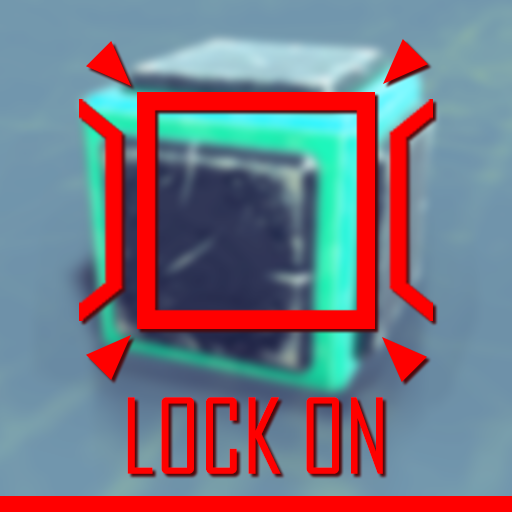
<style>
.page{position:relative;width:512px;height:512px}
.page>*{position:absolute;margin:0}
.t1{font:100px "AgencyFB-Reg";color:#ff0000}
</style>
<div class="page">
<p class="t1" style="left:127px;top:397px;width:256px;height:77px">LOCK ON</p>
</div>
